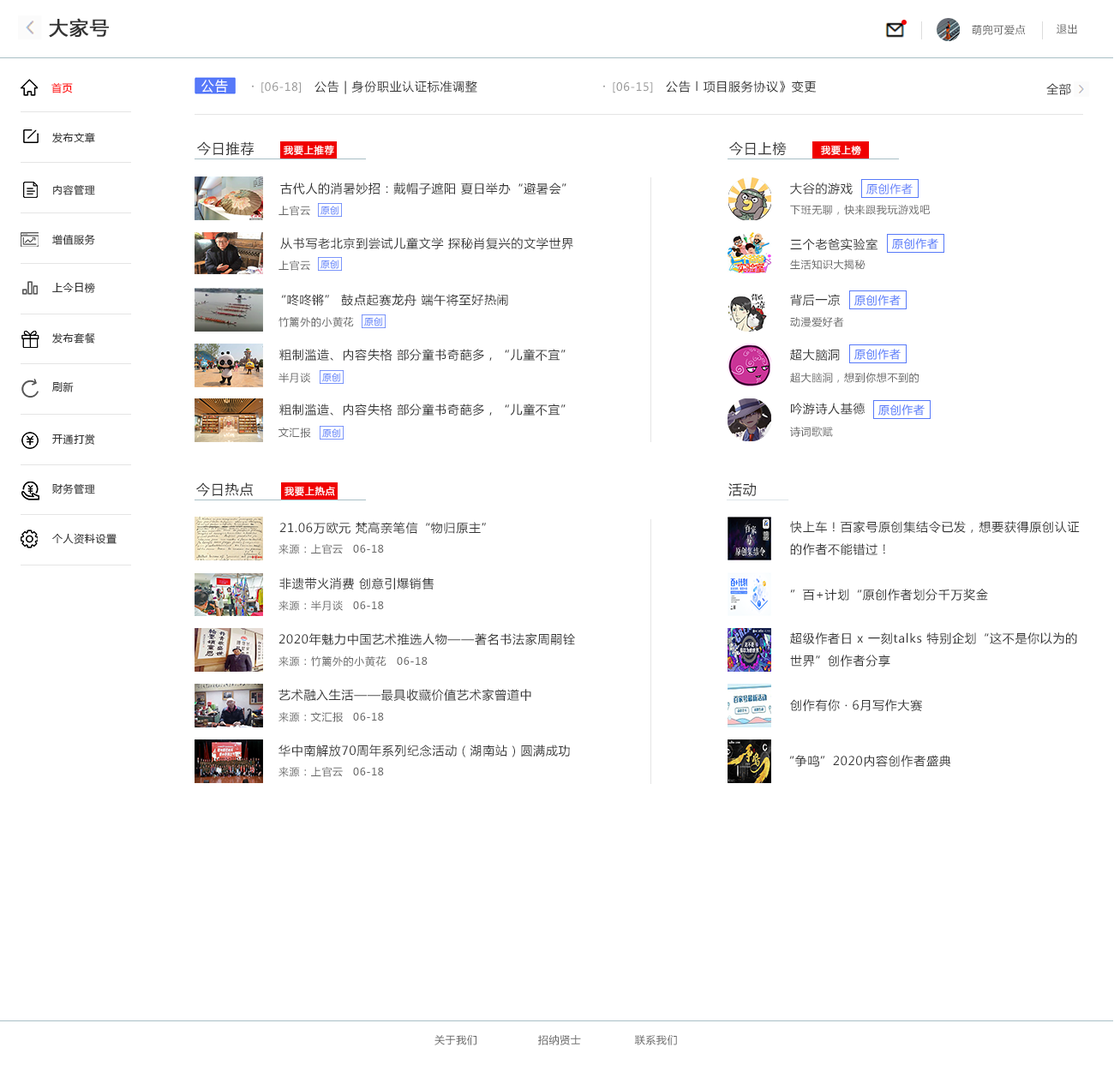
<style>
.page{position:relative;width:1114px;height:1071px;background:#ffffff}
.page>*{position:absolute;margin:0}
.t1{font:18.8px "MicrosoftYaHei";letter-spacing:0.05em;color:#333333;font-weight:bold}
.t2{font:10.3px "MicrosoftYaHei";letter-spacing:0.05em;color:#666666}
.t3{font:10.3px "MicrosoftYaHei";letter-spacing:0.05em;color:#ff0000}
.t4{font:13.7px "MicrosoftYaHei";letter-spacing:0.05em;color:#ffffff;scale:0.93 1}
.t5{font:11.1px "MicrosoftYaHei";letter-spacing:0.05em;color:#999999}
.t6{font:13.7px "MicrosoftYaHei";letter-spacing:0.05em;color:#999999}
.t7{font:12px "MicrosoftYaHei";letter-spacing:0.05em;color:#333333}
.t8{font:10.3px "MicrosoftYaHei";letter-spacing:0.05em;color:#333333}
.t9{font:13.7px "MicrosoftYaHei";letter-spacing:0.05em;color:#333333}
.t10{font:9.4px "MicrosoftYaHei";letter-spacing:0.05em;color:#ffffff;font-weight:bold}
.t11{font:11.1px "MicrosoftYaHei";letter-spacing:0.05em;color:#5779f9}
.t12{font:12px/5.1px "MicrosoftYaHei";letter-spacing:0.05em;color:#333333}
</style>
<div class="page">
<p class="t1" style="left:49px;top:18px;width:60px;height:20px">大家号</p>
<p class="t2" style="left:971px;top:25px;width:54px;height:10px">萌兜可爱点</p>
<p class="t2" style="left:1056px;top:24px;width:21px;height:10px">退出</p>
<p class="t3" style="left:51px;top:82px;width:22px;height:11px">首页</p>
<p class="t4" style="left:201px;top:79px;width:27px;height:14px">公告</p>
<p class="t5" style="left:252px;top:82px;width:49px;height:11px"><span class="t6">· </span>[06-18]</p>
<p class="t7" style="left:314px;top:81px;width:163px;height:13px">公告 | 身份职业认证标准调整</p>
<p class="t5" style="left:603px;top:82px;width:50px;height:11px"><span class="t6">· </span>[06-15]</p>
<p class="t7" style="left:666px;top:81px;width:150px;height:12px">公告 l 项目服务协议》变更</p>
<p class="t7" style="left:1046px;top:83px;width:25px;height:12px">全部</p>
<p class="t8" style="left:52px;top:132px;width:43px;height:11px">发布文章</p>
<p class="t9" style="left:197px;top:141px;width:57px;height:15px">今日推荐</p>
<p class="t10" style="left:284px;top:145px;width:50px;height:10px">我要上推荐</p>
<p class="t9" style="left:729px;top:141px;width:57px;height:15px">今日上榜</p>
<p class="t10" style="left:821px;top:146px;width:40px;height:9px">我要上榜</p>
<p class="t8" style="left:53px;top:184px;width:42px;height:11px">内容管理</p>
<p class="t7" style="left:280px;top:182px;width:286px;height:12px">古代人的消暑妙招：戴帽子遮阳 夏日举办“避暑会”</p>
<p class="t7" style="left:790px;top:182px;width:62px;height:12px">大谷的游戏</p>
<p class="t11" style="left:866px;top:183px;width:46px;height:11px">原创作者</p>
<p class="t2" style="left:278px;top:206px;width:32px;height:10px">上官云</p>
<p class="t2" style="left:790px;top:205px;width:139px;height:10px">下班无聊，快来跟我玩游戏吧</p>
<p class="t8" style="left:52px;top:234px;width:43px;height:11px">增值服务</p>
<p class="t7" style="left:280px;top:237px;width:293px;height:12px">从书写老北京到尝试儿童文学 探秘肖复兴的文学世界</p>
<p class="t7" style="left:790px;top:238px;width:87px;height:12px">三个老爸实验室</p>
<p class="t2" style="left:278px;top:260px;width:32px;height:11px">上官云</p>
<p class="t2" style="left:790px;top:260px;width:75px;height:10px">生活知识大揭秘</p>
<p class="t8" style="left:52px;top:282px;width:43px;height:11px">上今日榜</p>
<p class="t7" style="left:281px;top:294px;width:227px;height:12px">“咚咚锵” 鼓点起赛龙舟 端午将至好热闹</p>
<p class="t7" style="left:790px;top:294px;width:49px;height:12px">背后一凉</p>
<p class="t2" style="left:278px;top:317px;width:76px;height:10px">竹篱外的小黄花</p>
<p class="t2" style="left:790px;top:317px;width:54px;height:10px">动漫爱好者</p>
<p class="t8" style="left:52px;top:332px;width:43px;height:12px">发布套餐</p>
<p class="t7" style="left:279px;top:349px;width:286px;height:12px">粗制滥造、内容失格 部分童书奇葩多，“儿童不宜”</p>
<p class="t7" style="left:790px;top:349px;width:49px;height:12px">超大脑洞</p>
<p class="t2" style="left:278px;top:373px;width:33px;height:10px">半月谈</p>
<p class="t2" style="left:790px;top:373px;width:128px;height:10px">超大脑洞，想到你想不到的</p>
<p class="t8" style="left:52px;top:382px;width:22px;height:10px">刷新</p>
<p class="t7" style="left:279px;top:403px;width:286px;height:12px">粗制滥造、内容失格 部分童书奇葩多，“儿童不宜”</p>
<p class="t7" style="left:791px;top:403px;width:74px;height:12px">吟游诗人基德</p>
<p class="t8" style="left:52px;top:433px;width:43px;height:12px">开通打赏</p>
<p class="t2" style="left:278px;top:427px;width:33px;height:11px">文汇报</p>
<p class="t2" style="left:790px;top:427px;width:43px;height:10px">诗词歌赋</p>
<p class="t8" style="left:52px;top:483px;width:43px;height:11px">财务管理</p>
<p class="t9" style="left:196px;top:482px;width:57px;height:15px">今日热点</p>
<p class="t10" style="left:284px;top:486px;width:51px;height:10px">我要上热点</p>
<p class="t9" style="left:728px;top:482px;width:28px;height:15px">活动</p>
<p class="t7" style="left:279px;top:522px;width:207px;height:12px">21.06万欧元 梵高亲笔信“物归原主”</p>
<p class="t12" style="left:790px;top:521px;width:289px;height:34px">快上车！百家号原创集结令已发，想要获得原创认证<br>的作者不能错过 !</p>
<p class="t8" style="left:52px;top:533px;width:65px;height:11px">个人资料设置</p>
<p class="t2" style="left:278px;top:544px;width:65px;height:10px">来源：上官云</p>
<p class="t2" style="left:353px;top:544px;width:31px;height:9px">06-18</p>
<p class="t7" style="left:279px;top:577px;width:154px;height:12px">非遗带火消费 创意引爆销售</p>
<p class="t7" style="left:790px;top:589px;width:198px;height:11px">”百+计划“原创作者划分千万奖金</p>
<p class="t2" style="left:278px;top:600px;width:65px;height:11px">来源：半月谈</p>
<p class="t2" style="left:353px;top:600px;width:31px;height:9px">06-18</p>
<p class="t7" style="left:278px;top:633px;width:297px;height:12px">2020年魅力中国艺术推选人物——著名书法家周嗣铨</p>
<p class="t12" style="left:790px;top:632px;width:287px;height:34px">超级作者日 x 一刻talks 特别企划“这不是你以为的<br>世界”创作者分享</p>
<p class="t2" style="left:278px;top:656px;width:108px;height:10px">来源：竹篱外的小黄花</p>
<p class="t2" style="left:397px;top:656px;width:30px;height:9px">06-18</p>
<p class="t7" style="left:278px;top:689px;width:253px;height:12px">艺术融入生活——最具收藏价值艺术家曾道中</p>
<p class="t7" style="left:790px;top:699px;width:132px;height:12px">创作有你 · 6月写作大赛</p>
<p class="t2" style="left:278px;top:712px;width:66px;height:10px">来源：文汇报</p>
<p class="t2" style="left:353px;top:712px;width:31px;height:8px">06-18</p>
<p class="t7" style="left:278px;top:744px;width:292px;height:13px">华中南解放70周年系列纪念活动（湖南站）圆满成功</p>
<p class="t7" style="left:789px;top:755px;width:162px;height:12px">“争鸣”2020内容创作者盛典</p>
<p class="t2" style="left:278px;top:767px;width:65px;height:10px">来源：上官云</p>
<p class="t2" style="left:353px;top:767px;width:31px;height:8px">06-18</p>
<p class="t2" style="left:434px;top:1035px;width:243px;height:10px">关于我们                 招纳贤士               联系我们</p>
</div>
